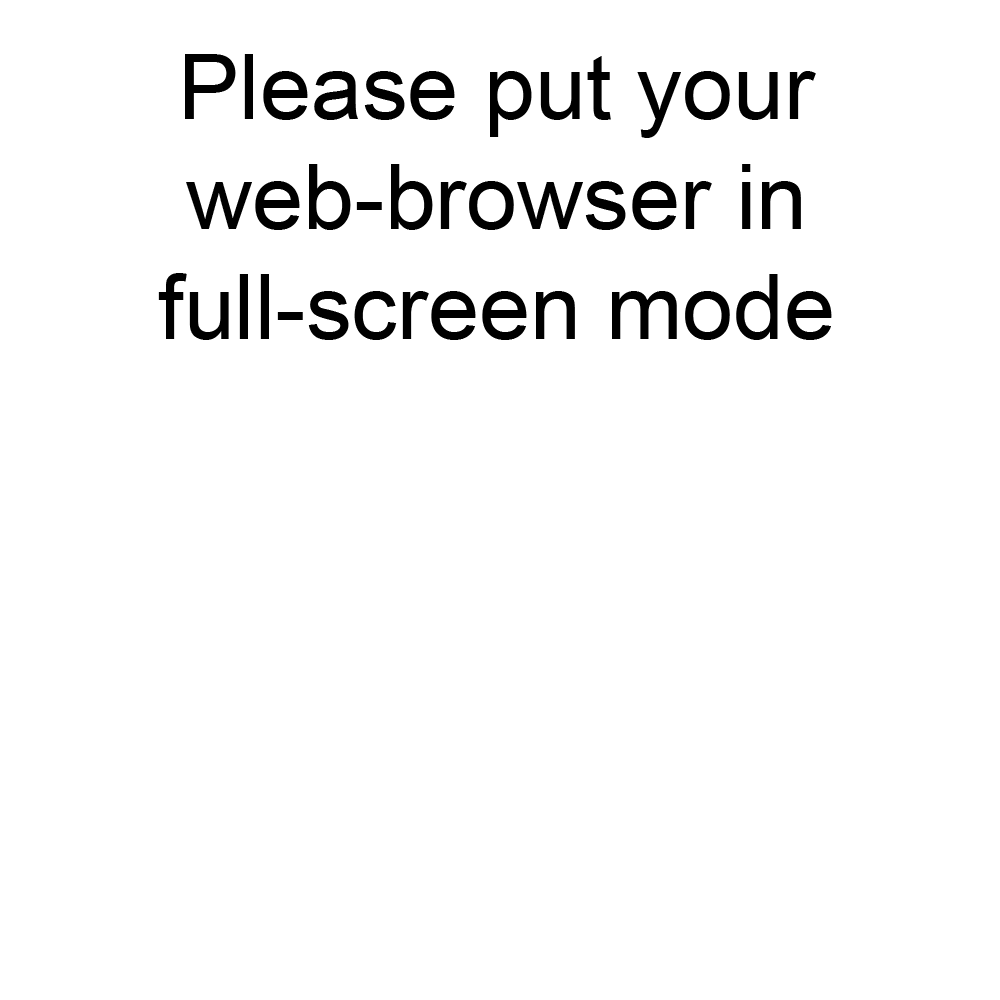
<style>
.page{position:relative;width:1000px;height:1000px;background:#ffffff}
.page>*{position:absolute;margin:0}
.t1{font:90px/110px "ArialMT";color:#000000}
</style>
<div class="page">
<p class="t1" style="left:158px;top:54px;width:674px;height:286px;text-align:center">Please put your web-browser in full-screen mode</p>
</div>
